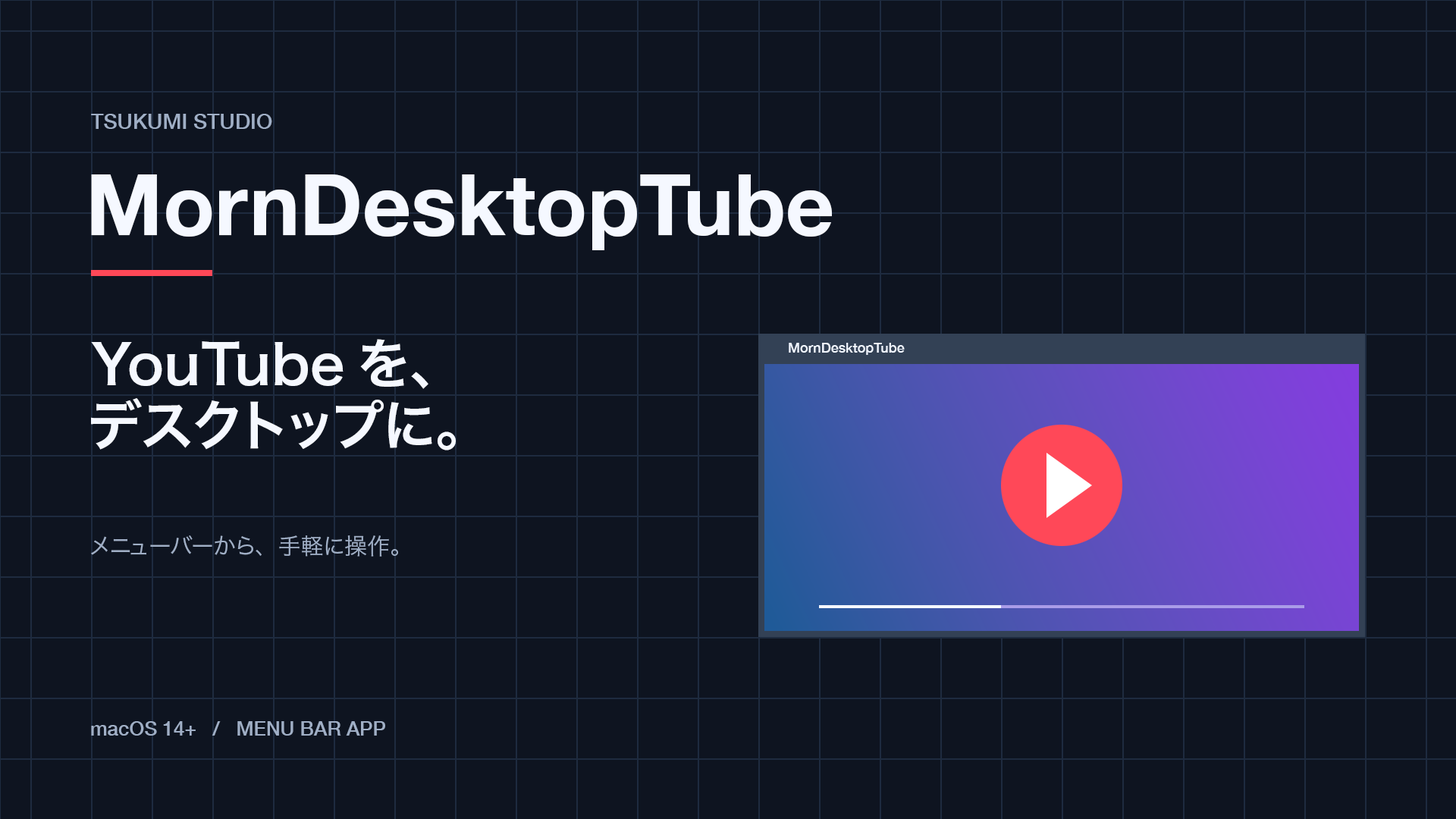
<style>
.page{position:relative;width:1456px;height:819px;background:#0e1420}
.page>*{position:absolute;margin:0}
.t1{font:21.2px "HelveticaNeue-Medium";color:#a0afc6}
.t2{font:84.9px "HelveticaNeue-Bold";color:#f5f8ff}
.t3{font:54.6px "HiraginoSans-W6";color:#f5f8ff}
.t4{font:13.6px "HelveticaNeue-Medium";color:#f0f5ff}
.t5{font:22.7px "HiraginoSans-W3";color:#a0afc6}
.t6{font:19.7px "HelveticaNeue-Medium";color:#a0afc6}
</style>
<div class="page">
<p class="t1" style="left:91px;top:114px;width:181px;height:15px">TSUKUMI STUDIO</p>
<p class="t2" style="left:91px;top:174px;width:742px;height:76px">MornDesktopTube</p>
<p class="t3" style="left:91px;top:339px;width:337px;height:50px">YouTubeを、</p>
<p class="t4" style="left:789px;top:343px;width:116px;height:12px">MornDesktopTube</p>
<p class="t3" style="left:91px;top:398px;width:365px;height:52px">デスクトップに。</p>
<p class="t5" style="left:91px;top:535px;width:307px;height:22px">メニューバーから、手軽に操作。</p>
<p class="t6" style="left:91px;top:721px;width:294px;height:15px">macOS 14+   /   MENU BAR APP</p>
</div>
